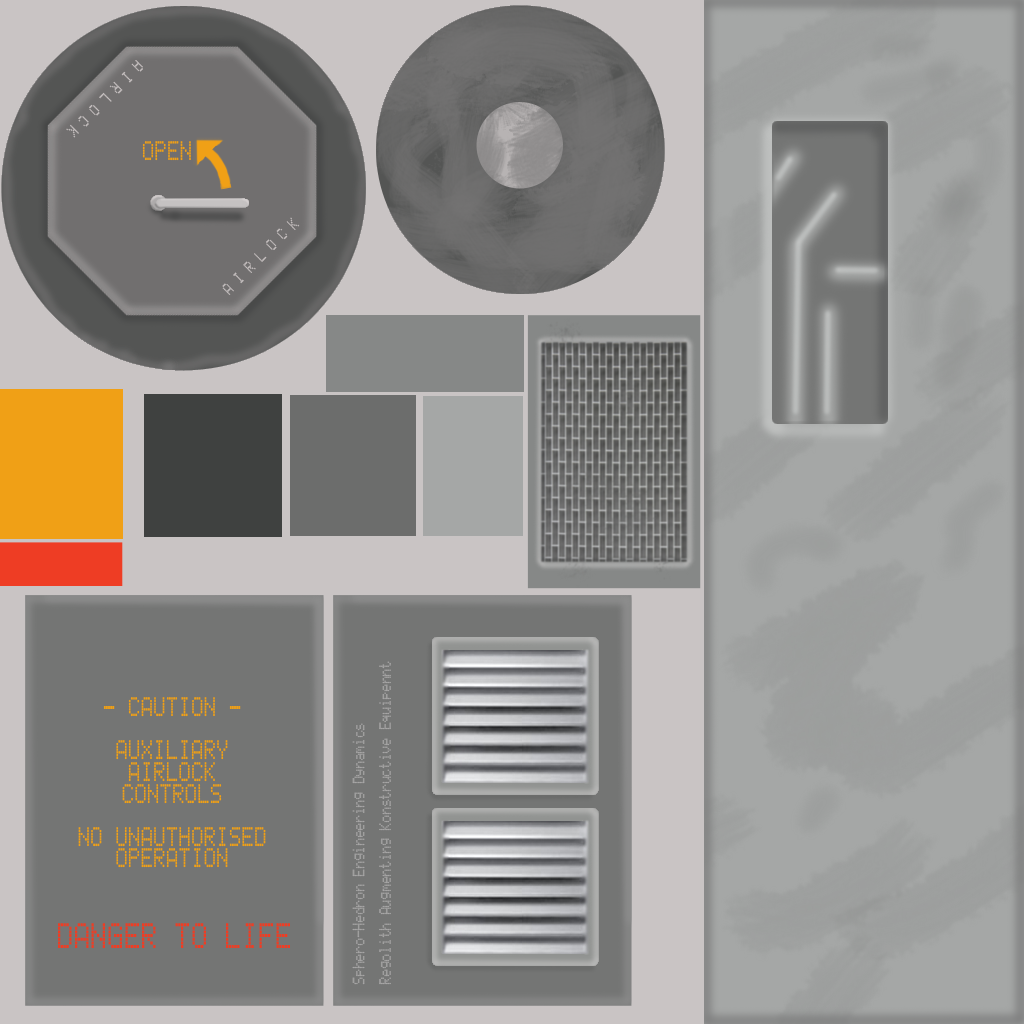
<style>
.page{position:relative;width:1024px;height:1024px}
.page>*{position:absolute;margin:0}
.t1{font:14.3px "LCD5x8H";color:#c9c3c3;scale:0.77 1}
.t2{font:23.4px "LCD5x8H";color:#f0a016;scale:0.77 1}
.t3{font:14.3px "LCD5x8H";color:#a6a5a5;scale:0.77 1}
.t4{font:31.2px "LCD5x8H";color:#ee3d24;scale:0.77 1}
</style>
<div class="page">
<p class="t1" style="left:66px;top:60px;width:77px;height:78px;rotate:135deg">A I R L O C K</p>
<p class="t2" style="left:142px;top:141px;width:49px;height:20px">OPEN</p>
<p class="t1" style="left:222px;top:217px;width:78px;height:78px;rotate:-45deg">A I R L O C K</p>
<p class="t3" style="left:352px;top:661px;width:39px;height:324px;rotate:-90deg">Sphero-Hedron Engineering Dynamics<br><br>Regolith Augmenting Konstructive Equipennt</p>
<p class="t2" style="left:78px;top:697px;width:188px;height:171px;text-align:center">- CAUTION -<br><br>AUXILIARY <br>AIRLOCK<br>CONTROLS<br><br>NO UNAUTHORISED<br>OPERATION</p>
<p class="t4" style="left:58px;top:923px;width:232px;height:25px">DANGER TO LIFE</p>
</div>
